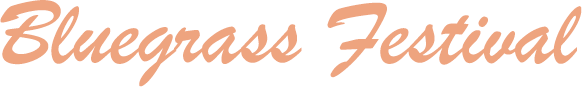
<style>
.page{position:relative;width:582px;height:87px;background:#ffffff}
.page>*{position:absolute;margin:0}
.t1{font:95.8px "BrushScriptMT";color:#eea47f}
</style>
<div class="page">
<p class="t1" style="left:0px;top:0px;width:582px;height:87px">Bluegrass Festival</p>
</div>
